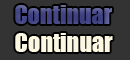
<style>
.page{position:relative;width:130px;height:60px;background:#333333}
.page>*{position:absolute;margin:0}
.t1{font:24px "Impact";color:#464887}
.t2{font:24px "Impact";color:#fdf8e2}
</style>
<div class="page">
<p class="t1" style="left:15px;top:5px;width:97px;height:19px">Continuar</p>
<p class="t2" style="left:15px;top:33px;width:98px;height:19px">Continuar</p>
</div>
